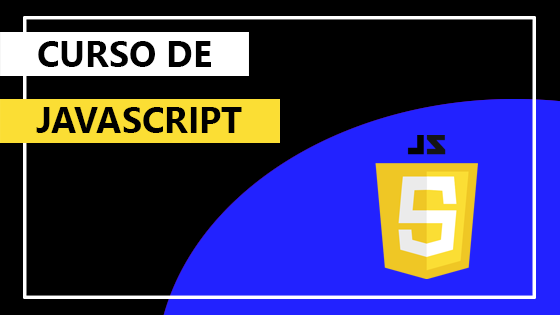
<style>
.page{position:relative;width:560px;height:315px;background:#000000}
.page>*{position:absolute;margin:0}
.t1{font:36px "SegoeUI-Bold";color:#000000}
</style>
<div class="page">
<p class="t1" style="left:38px;top:41px;width:173px;height:26px">CURSO DE</p>
<p class="t1" style="left:36px;top:107px;width:206px;height:26px">JAVASCRIPT</p>
</div>
